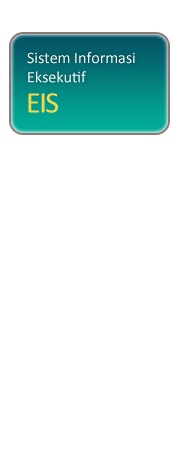
<style>
.page{position:relative;width:180px;height:450px;background:#ffffff}
.page>*{position:absolute;margin:0}
.t1{font:16px "Calibri";color:#ffffff}
.t2{font:30px "Calibri";letter-spacing:-0.05em;color:#f5db4c}
</style>
<div class="page">
<p class="t1" style="left:27px;top:52px;width:108px;height:31px">Sistem Informasi<br>Eksekutif</p>
<p class="t2" style="left:28px;top:93px;width:30px;height:20px">EIS</p>
</div>
